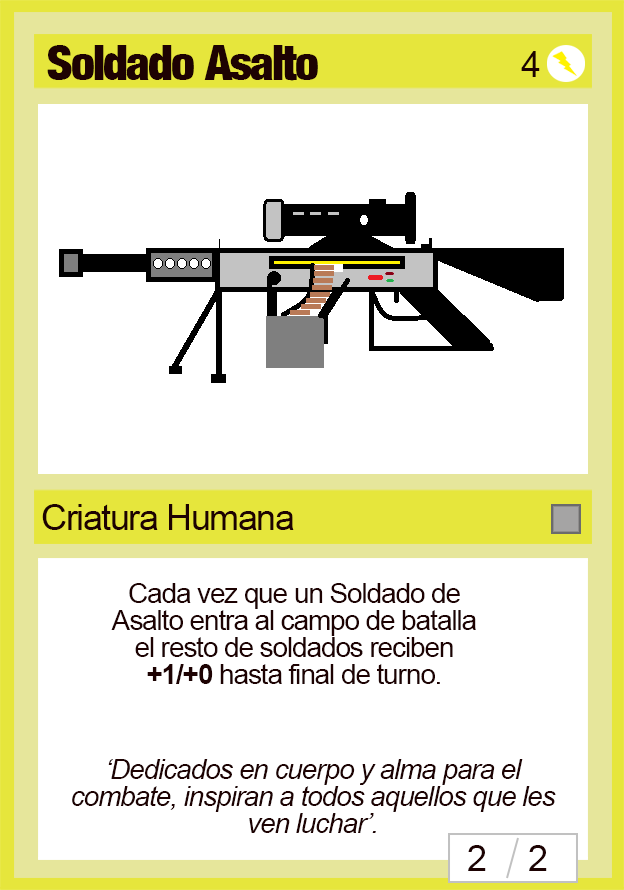
<style>
.page{position:relative;width:624px;height:890px;background:#ffffff}
.page>*{position:absolute;margin:0}
.t1{font:48px "Harvest";letter-spacing:-0.04em;color:#1d0202}
.t2{font:36px "ArialMT";letter-spacing:-0.04em;color:#1d0202}
.t3{font:28px/27px "ArialMT";letter-spacing:-0.04em;color:#1d0202}
.t4{font:28px/27px "Arial-BoldMT";letter-spacing:-0.04em;color:#1d0202}
.t5{font:28px/27px "Arial-ItalicMT";letter-spacing:-0.04em;color:#1d0202}
</style>
<div class="page">
<p class="t1" style="left:47px;top:45px;width:271px;height:36px">Soldado Asalto</p>
<p class="t2" style="left:521px;top:51px;width:19px;height:26px">4</p>
<p class="t2" style="left:42px;top:504px;width:252px;height:26px">Criatura Humana</p>
<p class="t3" style="left:111px;top:583px;width:365px;height:101px;text-align:center">Cada vez que un Soldado de Asalto entra al campo de batalla el resto de soldados reciben <span class="t4">+1/+0</span> hasta final de turno.</p>
<p class="t5" style="left:72px;top:759px;width:484px;height:74px;text-align:center">‘Dedicados en cuerpo y alma para el combate, inspiran a todos aquellos que les ven luchar’.</p>
<p class="t2" style="left:468px;top:845px;width:18px;height:26px">2</p>
<p class="t2" style="left:529px;top:845px;width:18px;height:26px">2</p>
</div>
